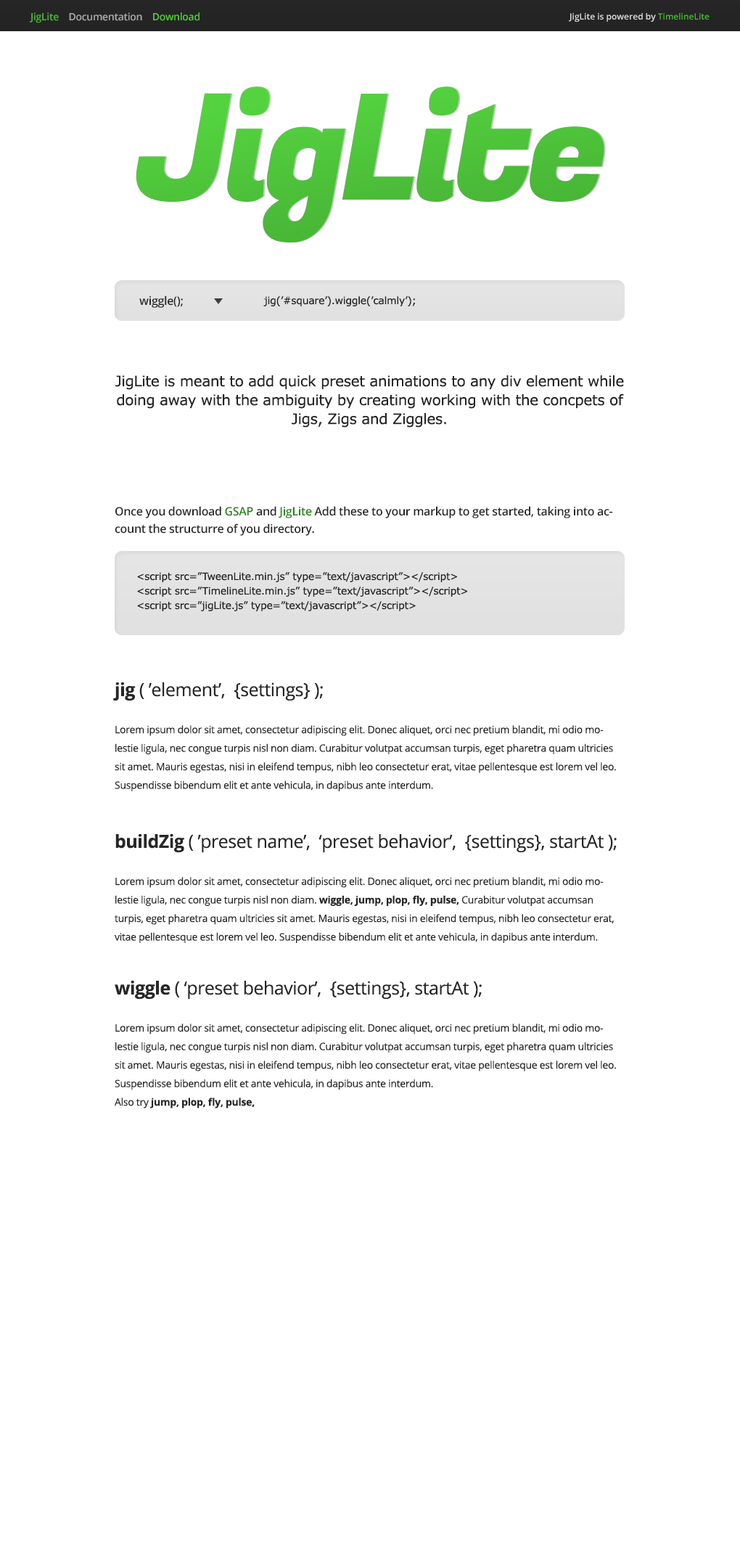
<style>
.page{position:relative;width:740px;height:1568px;background:#ffffff}
.page>*{position:absolute;margin:0}
.t1{font:10.2px "OpenSans-Semibold";letter-spacing:-0.02em;color:#a8a8a8}
.t2{font:10.2px "OpenSans-Semibold";letter-spacing:-0.02em;color:#48b536}
.t3{font:10.2px "OpenSans-Semibold";letter-spacing:-0.02em;color:#50c93c}
.t4{font:8.7px "OpenSans-Semibold";color:#d7d7d7}
.t5{font:8.7px "OpenSans-Semibold";color:#48b536}
.t6{font:147.1px "FugazOne-Regular";letter-spacing:-0.04em;color:#48b536}
.t7{font:11.6px "OpenSans-Semibold";letter-spacing:-0.02em;color:#272727}
.t8{font:10.2px "Verdana";letter-spacing:-0.02em;color:#242424}
.t9{font:14.5px/18.9px "Verdana";letter-spacing:-0.02em;color:#242424}
.t10{font:11.6px/17.4px "OpenSans-Semibold";letter-spacing:-0.02em;color:#272727}
.t11{font:11.6px/17.4px "OpenSans-Semibold";letter-spacing:-0.02em;color:#1f850f}
.t12{font:10.2px/14.5px "Verdana";letter-spacing:-0.02em;color:#242424}
.t13{font:10.2px/18.5px "OpenSans";letter-spacing:-0.02em;color:#272727}
.t14{font:18.1px/18.5px "OpenSans-Bold";letter-spacing:-0.02em;color:#272727}
.t15{font:18.1px/18.5px "OpenSans";letter-spacing:-0.02em;color:#272727}
.t16{font:10.2px/18.5px "OpenSans-Bold";letter-spacing:-0.02em;color:#272727}
</style>
<div class="page">
<p class="t1" style="left:30px;top:12px;width:170px;height:11px"><span class="t2">JigLite    </span>Documentation    <span class="t3">Download</span></p>
<p class="t4" style="left:569px;top:13px;width:141px;height:9px">JigLite is powered by <span class="t5">TimelineLite</span></p>
<p class="t6" style="left:136px;top:86px;width:469px;height:156px">JigLite</p>
<p class="t7" style="left:139px;top:295px;width:44px;height:13px">wiggle();</p>
<p class="t8" style="left:264px;top:296px;width:152px;height:10px">jig(’#square’).wiggle(’calmly’);</p>
<p class="t9" style="left:115px;top:375px;width:509px;height:53px;text-align:center">JigLite is meant to add quick preset animations to any div element while doing away with the ambiguity by creating working with the concpets of Jigs, Zigs and Ziggles.</p>
<p class="t10" style="left:115px;top:506px;width:498px;height:30px">Once you download <span class="t11">GSAP</span> and <span class="t11">JigLite</span> Add these to your markup to get started, taking into account the structurre of you directory.</p>
<p class="t12" style="left:137px;top:572px;width:331px;height:39px">&lt;script src=”TweenLite.min.js” type=”text/javascript”&gt;&lt;/script&gt;<br>&lt;script src=”TimelineLite.min.js” type=”text/javascript”&gt;&lt;/script&gt;<br>&lt;script src=”jigLite.js” type=”text/javascript”&gt;&lt;/script&gt;</p>
<p class="t13" style="left:113px;top:682px;width:503px;height:109px"><span class="t14">jig </span><span class="t15">( ’element’,  {settings} );<br></span><br>Lorem ipsum dolor sit amet, consectetur adipiscing elit. Donec aliquet, orci nec pretium blandit, mi odio molestie ligula, nec congue turpis nisl non diam. Curabitur volutpat accumsan turpis, eget pharetra quam ultricies sit amet. Mauris egestas, nisi in eleifend tempus, nibh leo consectetur erat, vitae pellentesque est lorem vel leo. Suspendisse bibendum elit et ante vehicula, in dapibus ante interdum.</p>
<p class="t13" style="left:115px;top:834px;width:502px;height:109px"><span class="t14">buildZig </span><span class="t15">( ’preset name’,  ‘preset behavior’,  {settings}, startAt );<br></span><br>Lorem ipsum dolor sit amet, consectetur adipiscing elit. Donec aliquet, orci nec pretium blandit, mi odio molestie ligula, nec congue turpis nisl non diam. <span class="t16">wiggle, jump, plop, fly, pulse, </span>Curabitur volutpat accumsan turpis, eget pharetra quam ultricies sit amet. Mauris egestas, nisi in eleifend tempus, nibh leo consectetur erat, vitae pellentesque est lorem vel leo. Suspendisse bibendum elit et ante vehicula, in dapibus ante interdum.</p>
<p class="t13" style="left:115px;top:981px;width:501px;height:127px"><span class="t14">wiggle </span><span class="t15">( ‘preset behavior’,  {settings}, startAt );<br></span><br>Lorem ipsum dolor sit amet, consectetur adipiscing elit. Donec aliquet, orci nec pretium blandit, mi odio molestie ligula, nec congue turpis nisl non diam. Curabitur volutpat accumsan turpis, eget pharetra quam ultricies sit amet. Mauris egestas, nisi in eleifend tempus, nibh leo consectetur erat, vitae pellentesque est lorem vel leo. Suspendisse bibendum elit et ante vehicula, in dapibus ante interdum.<br>Also try <span class="t16">jump, plop, fly, pulse,</span></p>
</div>
